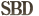
<style>
.page{position:relative;width:39px;height:16px;background:#ffffff}
.page>*{position:absolute;margin:0}
.t1{font:18px "RyuminPro-ExBold";letter-spacing:-0.06em;color:#4a3f32;font-weight:bold;scale:0.9 1}
</style>
<div class="page">
<p class="t1" style="left:1px;top:1px;width:32px;height:15px">SBD</p>
</div>
